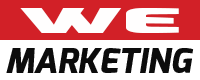
<style>
.page{position:relative;width:200px;height:80px;background:#d22027}
.page>*{position:absolute;margin:0}
.t1{font:34.5px "Exo-Black";color:#fffefe;text-transform:uppercase;scale:2.97 1}
.t2{font:34px "Exo-ExtraBold-Italic";color:#0c0c0c;text-transform:uppercase}
</style>
<div class="page">
<p class="t1" style="left:20px;top:8px;width:159px;height:25px">wE</p>
<p class="t2" style="left:6px;top:48px;width:188px;height:25px">Marketing</p>
</div>
